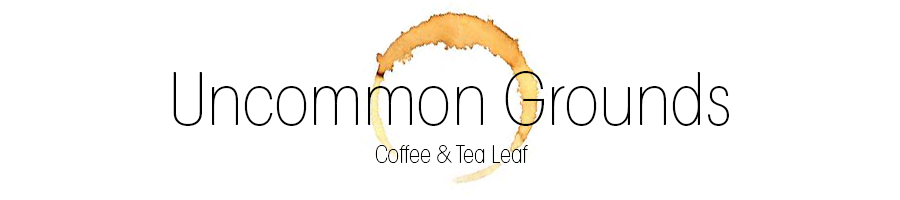
<style>
.page{position:relative;width:900px;height:200px;background:#ffffff}
.page>*{position:absolute;margin:0}
.t1{font:72px "ITCAvantGardeStd-XLtCn";color:#000000}
.t2{font:24px "ITCAvantGardeStd-XLtCn";color:#000000}
</style>
<div class="page">
<p class="t1" style="left:173px;top:71px;width:556px;height:55px">Uncommon Grounds</p>
<p class="t2" style="left:375px;top:145px;width:153px;height:18px">Coffee &amp; Tea Leaf</p>
</div>
